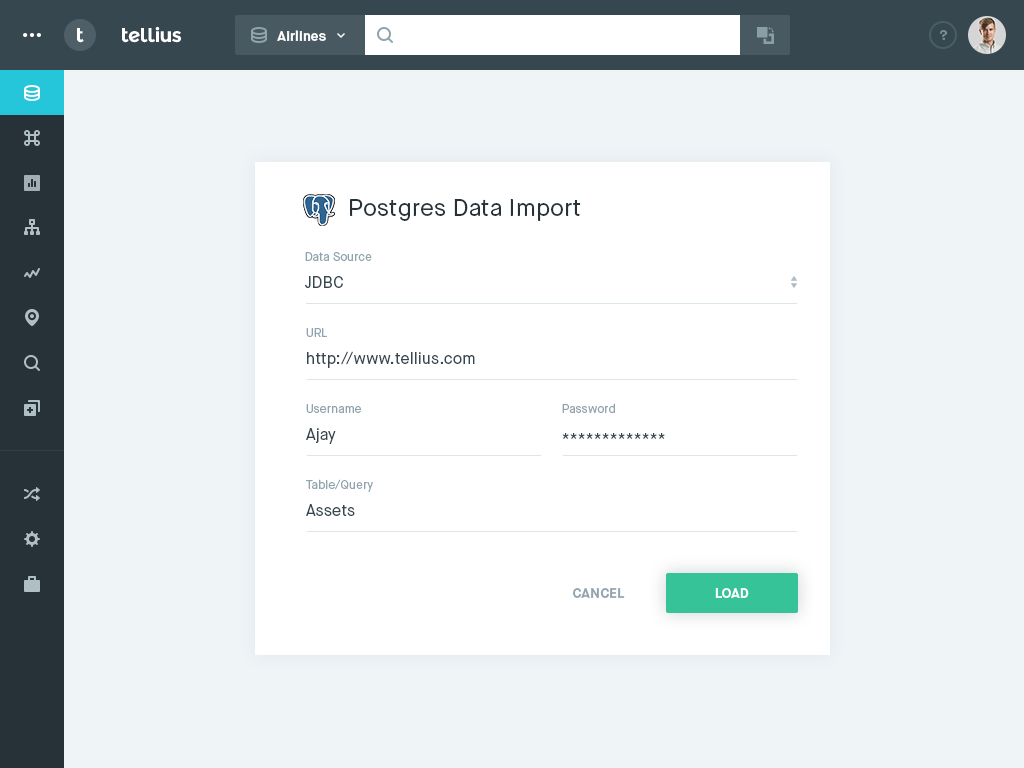
<style>
.page{position:relative;width:1024px;height:768px;background:#eff4f7}
.page>*{position:absolute;margin:0}
.t1{font:20px "MontserratAlternates-Bold";letter-spacing:-0.04em;color:#ffffff}
.t2{font:14px "MaisonNeue-Bold";color:#ffffff}
.t3{font:14px "MaisonNeue-Bold";color:#78909c}
.t4{font:24px "MaisonNeue-Book";color:#263238}
.t5{font:12px "MaisonNeue-Book";color:#90a4ae}
.t6{font:16px "MaisonNeue-Book";color:#37474f}
.t7{font:14px "MaisonNeue-Bold";color:#90a4ae;text-transform:uppercase}
.t8{font:14px "MaisonNeue-Bold";color:#ffffff;text-transform:uppercase}
</style>
<div class="page">
<p class="t1" style="left:77px;top:28px;width:7px;height:15px">t</p>
<p class="t1" style="left:122px;top:26px;width:59px;height:17px">tellius</p>
<p class="t2" style="left:277px;top:30px;width:49px;height:11px">Airlines</p>
<p class="t3" style="left:939px;top:30px;width:9px;height:10px">?</p>
<p class="t4" style="left:350px;top:199px;width:231px;height:22px">Postgres Data Import</p>
<p class="t5" style="left:305px;top:252px;width:67px;height:9px">Data Source</p>
<p class="t6" style="left:305px;top:276px;width:38px;height:12px">JDBC</p>
<p class="t5" style="left:306px;top:328px;width:21px;height:9px">URL</p>
<p class="t6" style="left:307px;top:351px;width:168px;height:17px">http://www.tellius.com</p>
<p class="t5" style="left:306px;top:404px;width:55px;height:9px">Username</p>
<p class="t5" style="left:562px;top:403px;width:53px;height:10px">Password</p>
<p class="t6" style="left:306px;top:428px;width:30px;height:16px">Ajay</p>
<p class="t6" style="left:562px;top:433px;width:103px;height:6px">*************</p>
<p class="t5" style="left:306px;top:479px;width:67px;height:13px">Table/Query</p>
<p class="t6" style="left:306px;top:504px;width:49px;height:12px">Assets</p>
<p class="t7" style="left:573px;top:588px;width:52px;height:10px">Cancel</p>
<p class="t8" style="left:715px;top:588px;width:34px;height:10px">Load</p>
</div>
